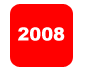
<style>
.page{position:relative;width:85px;height:73px;background:#ff0000}
.page>*{position:absolute;margin:0}
.t1{font:18px "Arial-Black";letter-spacing:-0.01em;color:#ffffff}
</style>
<div class="page">
<p class="t1" style="left:18px;top:27px;width:47px;height:14px">2008</p>
</div>
